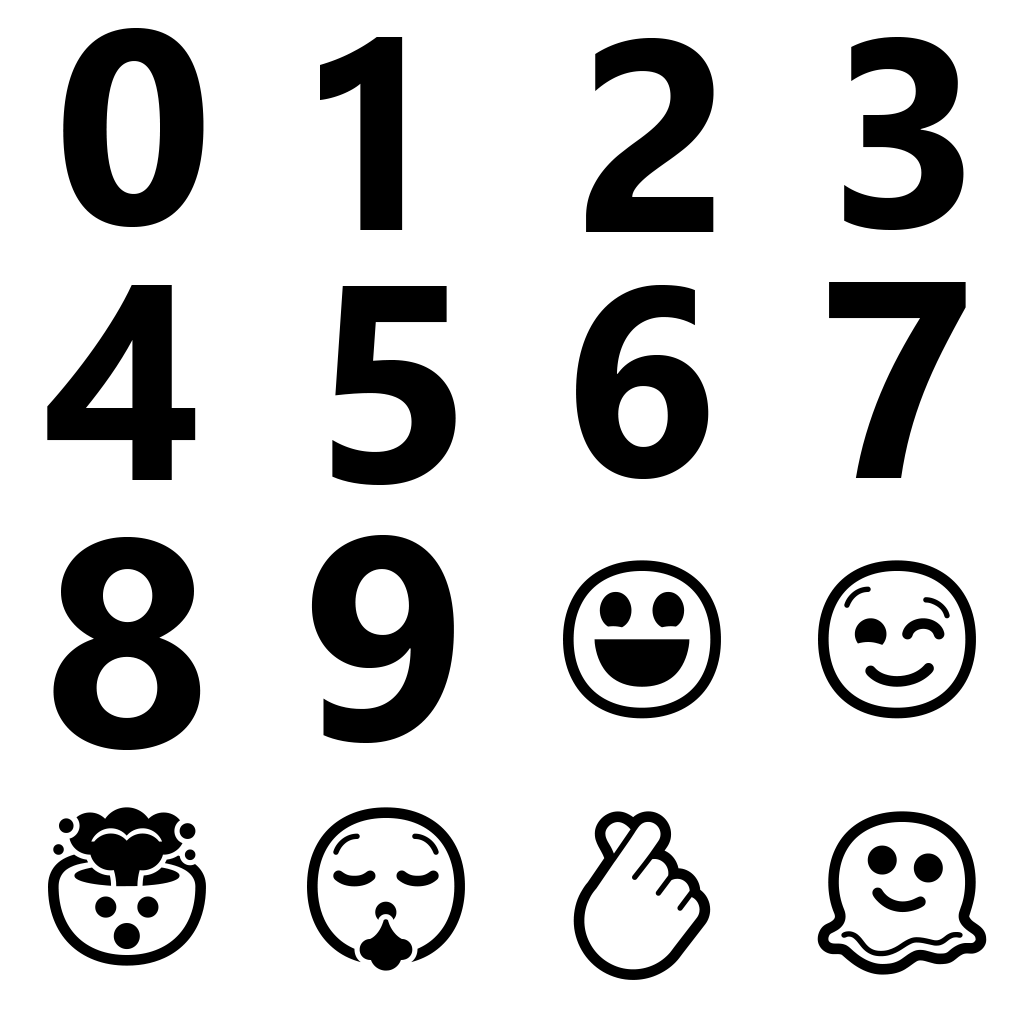
<style>
.page{position:relative;width:1024px;height:1024px;background:#ffffff}
.page>*{position:absolute;margin:0}
.t1{font:276px "SegoeUI-Bold";color:#000000}
.t2{font:271.3px "SegoeUI-Bold";color:#000000}
.t3{font:273.4px "SegoeUI-Bold";color:#000000}
.t4{font:267.1px "SegoeUI-Bold";color:#000000}
.t5{font:278.7px "SegoeUI-Bold";color:#000000}
.t6{font:280.4px "SegoeUI-Bold";color:#000000}
.t7{font:267.9px "SegoeUI-Bold";color:#000000}
.t8{font:279.9px "SegoeUI-Bold";color:#000000}
.t9{font:294.8px "SegoeUI-Bold";color:#000000}
.t10{font:287.6px "SegoeUI-Bold";color:#000000}
</style>
<div class="page">
<p class="t1" style="left:63px;top:28px;width:141px;height:199px">0</p>
<p class="t2" style="left:320px;top:37px;width:83px;height:193px">1</p>
<p class="t3" style="left:586px;top:38px;width:128px;height:194px">2</p>
<p class="t4" style="left:844px;top:37px;width:120px;height:193px">3</p>
<p class="t5" style="left:47px;top:285px;width:149px;height:195px">4</p>
<p class="t6" style="left:332px;top:286px;width:124px;height:199px">5</p>
<p class="t7" style="left:576px;top:285px;width:133px;height:194px">6</p>
<p class="t8" style="left:829px;top:282px;width:137px;height:196px">7</p>
<p class="t9" style="left:53px;top:537px;width:148px;height:213px">8</p>
<p class="t10" style="left:311px;top:535px;width:143px;height:208px">9</p>
</div>
